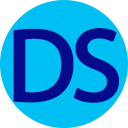
<style>
.page{position:relative;width:128px;height:128px;background:#00bff3}
.page>*{position:absolute;margin:0}
.t1{font:103.3px "MyriadPro-Regular";color:#040b8b;font-weight:bold}
</style>
<div class="page">
<p class="t1" style="left:13px;top:28px;width:61px;height:75px">D</p>
<p class="t1" style="left:73px;top:28px;width:46px;height:75px">S</p>
</div>
